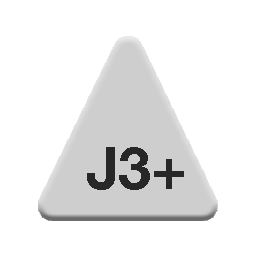
<style>
.page{position:relative;width:256px;height:256px;background:#ffffff}
.page>*{position:absolute;margin:0}
.t1{font:58.6px "HelveticaNeue-Bold";color:#282728}
</style>
<div class="page">
<p class="t1" style="left:87px;top:147px;width:97px;height:43px">J3+</p>
</div>
